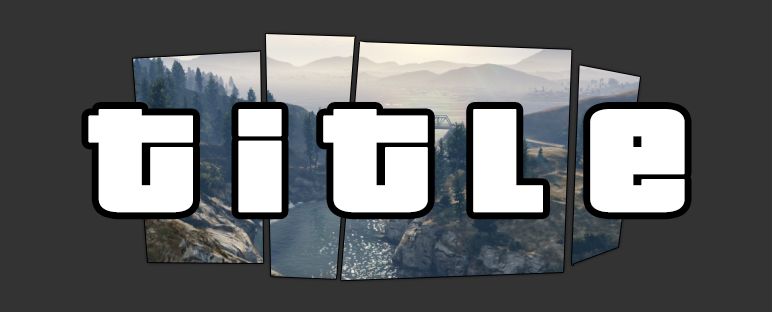
<style>
.page{position:relative;width:772px;height:312px;background:#333333}
.page>*{position:absolute;margin:0}
.t1{font:200px "Pricedown";letter-spacing:0.12em;color:#ffffff;font-weight:bold;scale:1.25 1}
</style>
<div class="page">
<p class="t1" style="left:88px;top:109px;width:597px;height:104px">Title</p>
</div>
